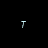
<style>
.page{position:relative;width:48px;height:48px;background:#000000}
.page>*{position:absolute;margin:0}
.t1{font:8.8px "AvantGardeLT-ExtraLightObl";color:#cdf8fd;text-transform:uppercase}
</style>
<div class="page">
<p class="t1" style="left:21px;top:21px;width:5px;height:7px">T</p>
</div>
